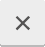
<style>
.page{position:relative;width:45px;height:47px;background:#ededed}
.page>*{position:absolute;margin:0}
.t1{font:30px "Helvetica";color:#545353}
</style>
<div class="page">
<p class="t1" style="left:15px;top:16px;width:15px;height:15px">×</p>
</div>
